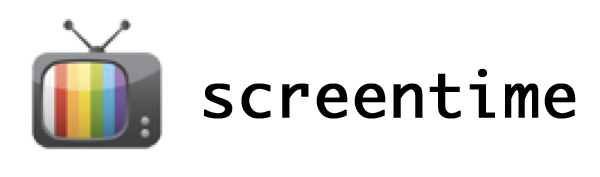
<style>
.page{position:relative;width:600px;height:177px;background:#ffffff}
.page>*{position:absolute;margin:0}
.t1{font:60px "Monaco";color:#000000;font-weight:bold}
</style>
<div class="page">
<p class="t1" style="left:204px;top:69px;width:372px;height:50px">screentime</p>
</div>
